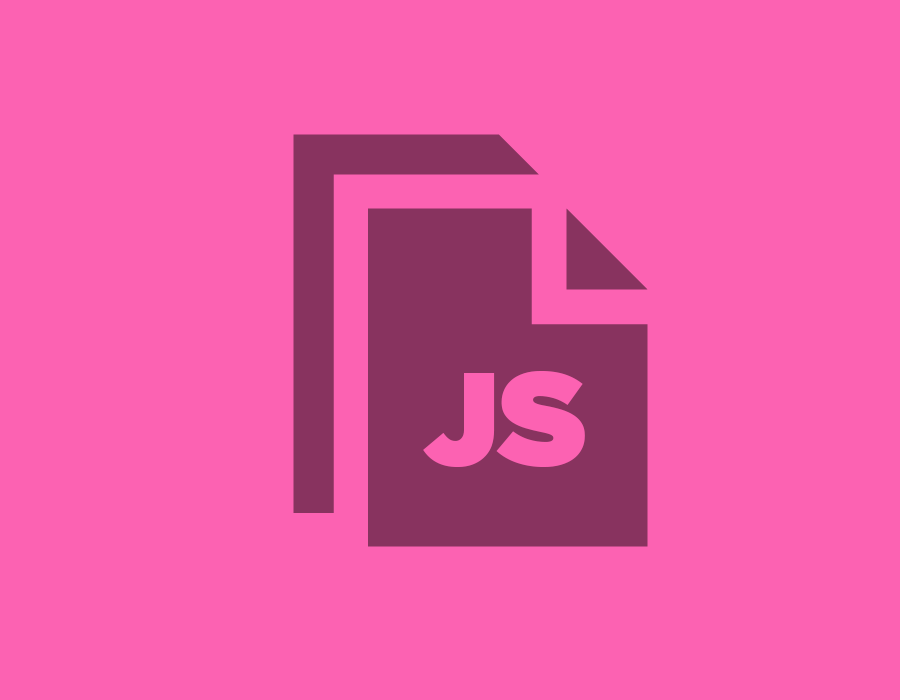
<style>
.page{position:relative;width:900px;height:700px;background:#fc62b2}
.page>*{position:absolute;margin:0}
.t1{font:131.7px "GothamUltra";color:#fc62b2}
</style>
<div class="page">
<p class="t1" style="left:423px;top:371px;width:162px;height:96px">JS</p>
</div>
